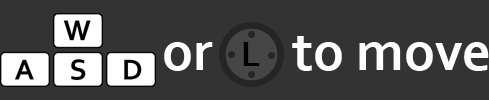
<style>
.page{position:relative;width:489px;height:100px;background:#333333}
.page>*{position:absolute;margin:0}
.t1{font:56px "Corbel-Bold";color:#ffffff}
.t2{font:36px "Corbel-Bold";color:#000000}
</style>
<div class="page">
<p class="t1" style="left:292px;top:36px;width:197px;height:35px">to move</p>
<p class="t1" style="left:164px;top:42px;width:49px;height:29px">or</p>
<p class="t2" style="left:243px;top:42px;width:17px;height:24px">L</p>
</div>
